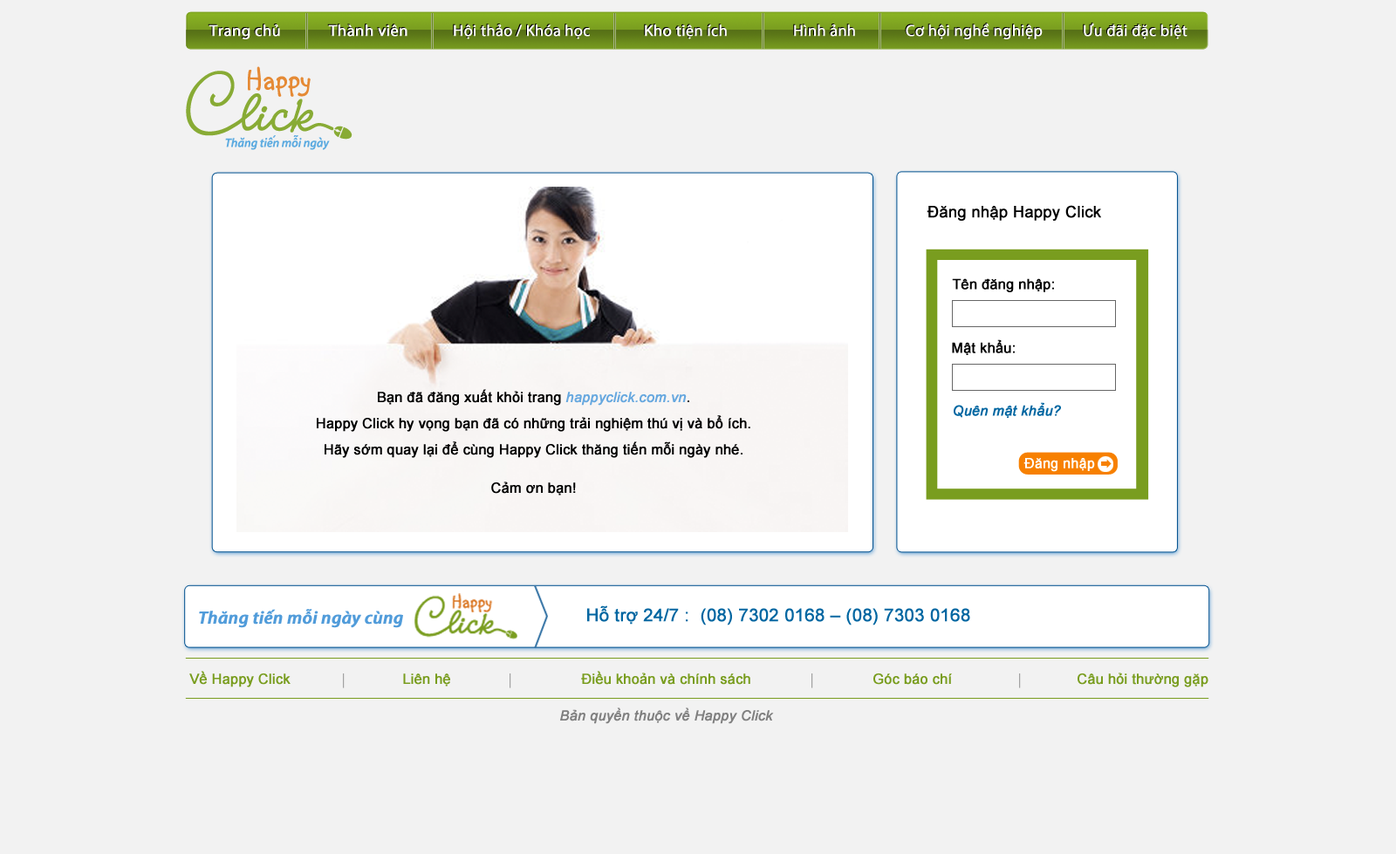
<style>
.page{position:relative;width:1396px;height:854px;background:#f2f2f2}
.page>*{position:absolute;margin:0}
.t1{font:15.7px "MyriadWebPro";font-weight:bold}
.t2{font:15.7px "MyriadPro-Regular";font-weight:bold}
.t3{font:15.7px "MyriadWebPro";color:#ffffff;font-weight:bold}
.t4{font:15.7px "MyriadPro-Regular";color:#ffffff;font-weight:bold}
.t5{font:15.7px "ArialMT";color:#000000;font-weight:bold}
.t6{font:14px "ArialMT";color:#000000;font-weight:bold}
.t7{font:14px/26.2px "ArialMT";color:#000000;font-weight:bold}
.t8{font:14px/26.2px "Arial-ItalicMT";color:#67a8df;font-weight:bold}
.t9{font:14px/38.4px "ArialMT";color:#000000;font-weight:bold}
.t10{font:14px "Arial-ItalicMT";color:#0066a1;font-weight:bold}
.t11{font:14px "ArialMT";color:#ffffff;font-weight:bold}
.t12{font:17.5px "ArialMT";color:#0066a1;font-weight:bold}
.t13{font:17.9px "MyriadPro-SemiboldIt";color:#519cda;font-weight:bold}
.t14{font:14px "ArialMT";color:#799d1f;font-weight:bold}
.t15{font:14px "Arial-ItalicMT";color:#808080;font-weight:bold}
</style>
<div class="page">
<p class="t1" style="left:208px;top:24px;width:71px;height:14px">Trang ch<span class="t2">ủ</span></p>
<p class="t3" style="left:209px;top:24px;width:71px;height:15px">Trang ch<span class="t4">ủ</span></p>
<p class="t1" style="left:327px;top:24px;width:80px;height:12px">Thành viên</p>
<p class="t3" style="left:328px;top:24px;width:79px;height:13px">Thành viên</p>
<p class="t4" style="left:454px;top:24px;width:136px;height:15px"><span class="t3">H</span>ội thảo / Khóa học</p>
<p class="t1" style="left:644px;top:24px;width:82px;height:14px">Kho ti<span class="t2">ện ích</span></p>
<p class="t3" style="left:645px;top:24px;width:82px;height:15px">Kho ti<span class="t4">ện ích</span></p>
<p class="t4" style="left:794px;top:24px;width:61px;height:13px">Hình ảnh</p>
<p class="t2" style="left:905px;top:23px;width:137px;height:15px">Cơ hội nghề nghiệp</p>
<p class="t4" style="left:906px;top:24px;width:137px;height:15px">Cơ hội nghề nghiệp</p>
<p class="t2" style="left:1083px;top:22px;width:104px;height:16px">Ưu đãi đặc biệt</p>
<p class="t4" style="left:1084px;top:23px;width:103px;height:16px">Ưu đãi đặc biệt</p>
<p class="t5" style="left:927px;top:205px;width:174px;height:16px">Đăng nhập Happy Click</p>
<p class="t6" style="left:952px;top:278px;width:102px;height:14px">Tên đăng nhập:</p>
<p class="t6" style="left:952px;top:339px;width:63px;height:16px">Mật khẩu:</p>
<p class="t7" style="left:317px;top:389px;width:433px;height:107px;text-align:center">Bạn đã đăng xuất khỏi trang <span class="t8">happyclick.com.vn</span>.<br>Happy Click hy vọng bạn đã có những trải nghiệm thú vị và bổ ích.<br>Hãy sớm quay lại để cùng Happy Click thăng tiến mỗi ngày nhé.<br><span class="t9">Cảm ơn bạn!</span></p>
<p class="t10" style="left:954px;top:402px;width:107px;height:16px">Quên mật khẩu?</p>
<p class="t11" style="left:1023px;top:458px;width:72px;height:14px">Đăng nhập</p>
<p class="t12" style="left:587px;top:606px;width:383px;height:20px">Hỗ trợ 24/7 :  (08) 7302 0168 – (08) 7303 0168</p>
<p class="t13" style="left:199px;top:609px;width:204px;height:19px">Thăng tiến mỗi ngày cùng</p>
<p class="t14" style="left:189px;top:671px;width:102px;height:17px">Về Happy Click</p>
<p class="t14" style="left:403px;top:674px;width:47px;height:13px">Liên hệ</p>
<p class="t14" style="left:581px;top:671px;width:169px;height:14px">Điều khoản và chính sách</p>
<p class="t14" style="left:873px;top:674px;width:79px;height:11px">Góc báo chí</p>
<p class="t14" style="left:1078px;top:673px;width:130px;height:15px">Câu hỏi thường gặp</p>
<p class="t15" style="left:560px;top:708px;width:214px;height:16px">Bản quyền thuộc về Happy Click</p>
</div>
